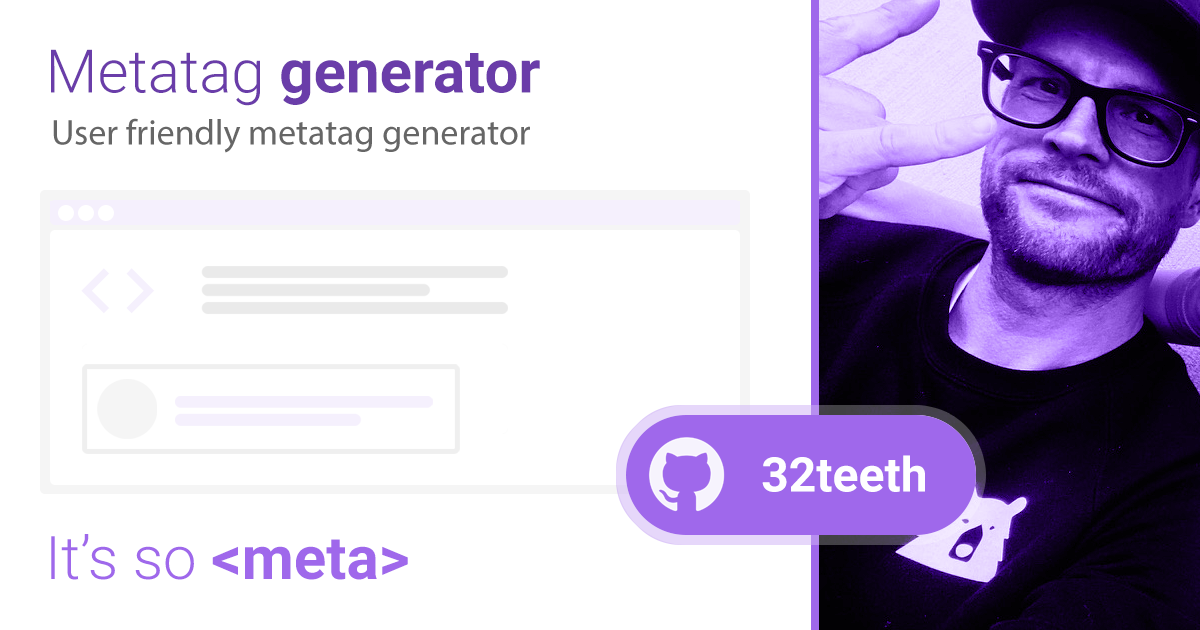
<style>
.page{position:relative;width:1200px;height:630px;background:#ffffff}
.page>*{position:absolute;margin:0}
.t1{font:60px "Roboto-Bold";color:#6a3da9}
.t2{font:60px "Roboto-Light";color:#6a3da9}
.t3{font:90px "AnonymicePowerline-Bold";color:#f5f0fd}
.t4{font:48px "Roboto-Bold";color:#fefeff}
.t5{font:60px "Roboto-Light";color:#9f68eb}
.t6{font:60px "Roboto-Bold";color:#9f68eb}
</style>
<div class="page">
<p class="t1" style="left:51px;top:49px;width:489px;height:57px"><span class="t2">Metatag </span>generator</p>
<p class="t3" style="left:81px;top:268px;width:74px;height:46px">&lt;&gt;</p>
<p class="t4" style="left:762px;top:455px;width:163px;height:37px">32teeth</p>
<p class="t5" style="left:51px;top:534px;width:357px;height:46px">It’s so <span class="t6">&lt;meta&gt;</span></p>
</div>
